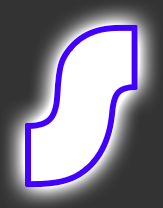
<style>
.page{position:relative;width:163px;height:208px;background:#ffffff}
.page>*{position:absolute;margin:0}
.t1{font:78px "Bauhaus93";letter-spacing:-0.07em;color:#ffffff;font-weight:bold;scale:0.97 1}
</style>
<div class="page">
<p class="t1" style="left:25px;top:24px;width:113px;height:164px;text-align:center">s</p>
</div>
